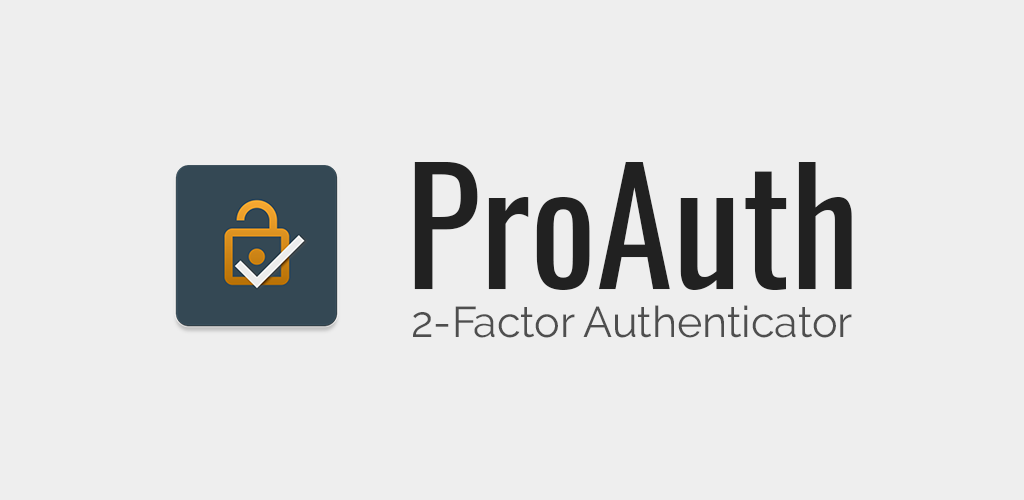
<style>
.page{position:relative;width:1024px;height:500px;background:#eeeeee}
.page>*{position:absolute;margin:0}
.t1{font:156px "Oswald-Regular";color:#212121}
.t2{font:43px "Raleway-Regular";color:#4e4e4e}
</style>
<div class="page">
<p class="t1" style="left:414px;top:162px;width:438px;height:128px">ProAuth</p>
<p class="t2" style="left:413px;top:305px;width:439px;height:33px">2-Factor Authenticator</p>
</div>
